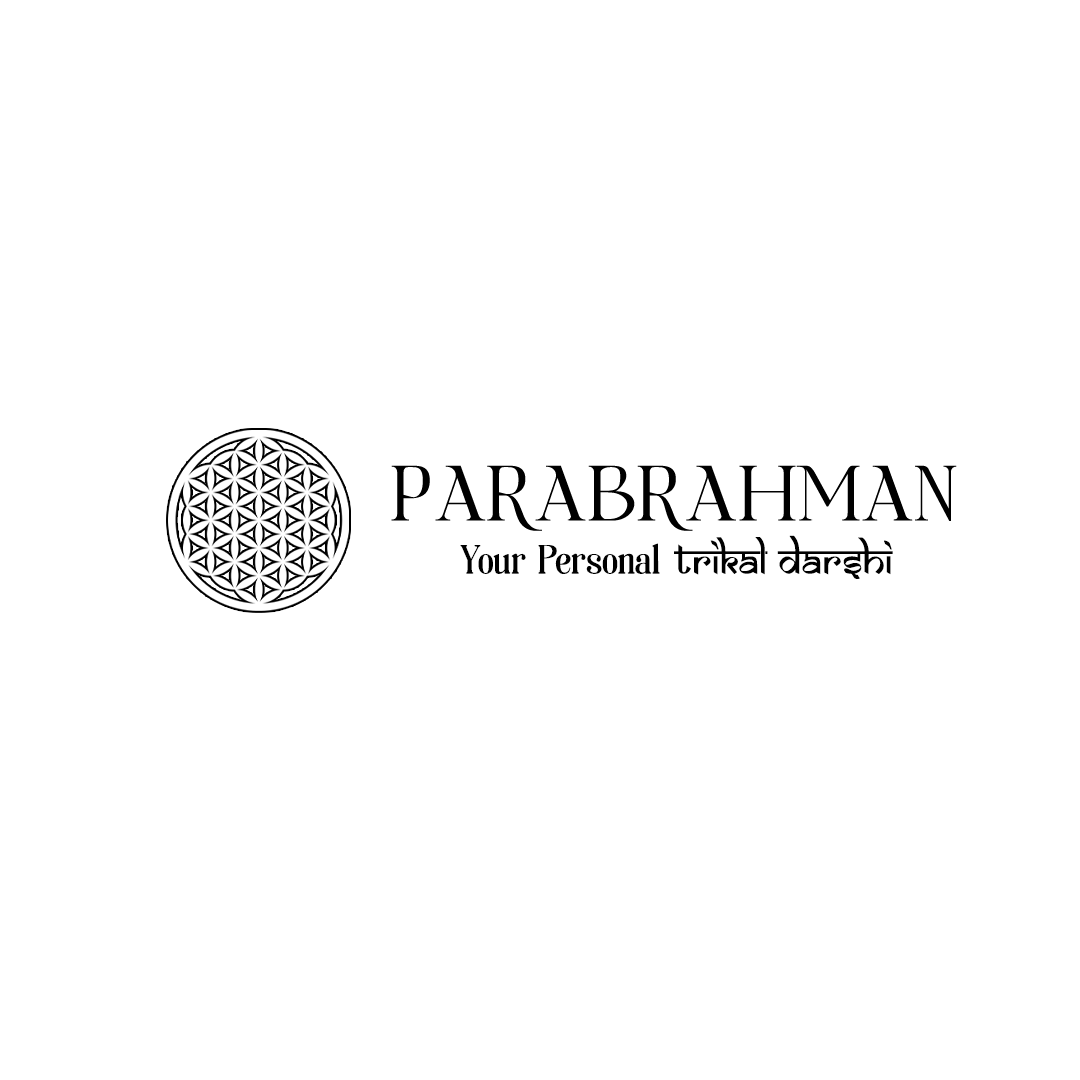
<style>
.page{position:relative;width:1080px;height:1080px;background:#ffffff}
.page>*{position:absolute;margin:0}
.t1{font:41.7px "Soria-Soria";color:#000000}
.t2{font:41.7px "SamarkanNormal";color:#000000}
</style>
<div class="page">
<p class="t1" style="left:460px;top:535px;width:433px;height:44px">Your Personal <span class="t2">Trikal Darshi</span></p>
</div>
